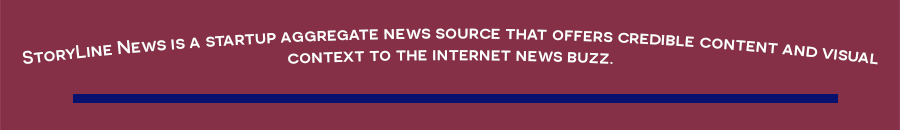
<style>
.page{position:relative;width:900px;height:130px;background:#863048}
.page>*{position:absolute;margin:0}
.t1{font:18px "Novecentosanswide-Medium";color:#ffffff}
</style>
<div class="page">
<p class="t1" style="left:22px;top:28px;width:856px;height:37px;text-align:center">StoryLine News is a startup aggregate news source that offers credible content and visual context to the internet news buzz.</p>
</div>
